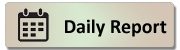
<style>
.page{position:relative;width:180px;height:50px}
.page>*{position:absolute;margin:0}
.t1{font:20px "Calibri-Bold";color:#000000}
</style>
<div class="page">
<p class="t1" style="left:65px;top:19px;width:102px;height:18px">Daily Report</p>
</div>
